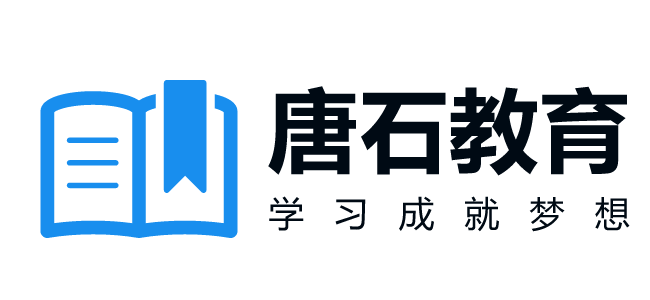
<style>
.page{position:relative;width:650px;height:300px;background:#ffffff}
.page>*{position:absolute;margin:0}
.t1{font:90.7px "MicrosoftYaHei-Bold";color:#000a14}
.t2{font:35.4px "MicrosoftYaHei";letter-spacing:0.84em;color:#000a14}
</style>
<div class="page">
<p class="t1" style="left:268px;top:86px;width:359px;height:90px">唐石教育</p>
<p class="t2" style="left:269px;top:196px;width:361px;height:36px">学习成就梦想</p>
</div>
